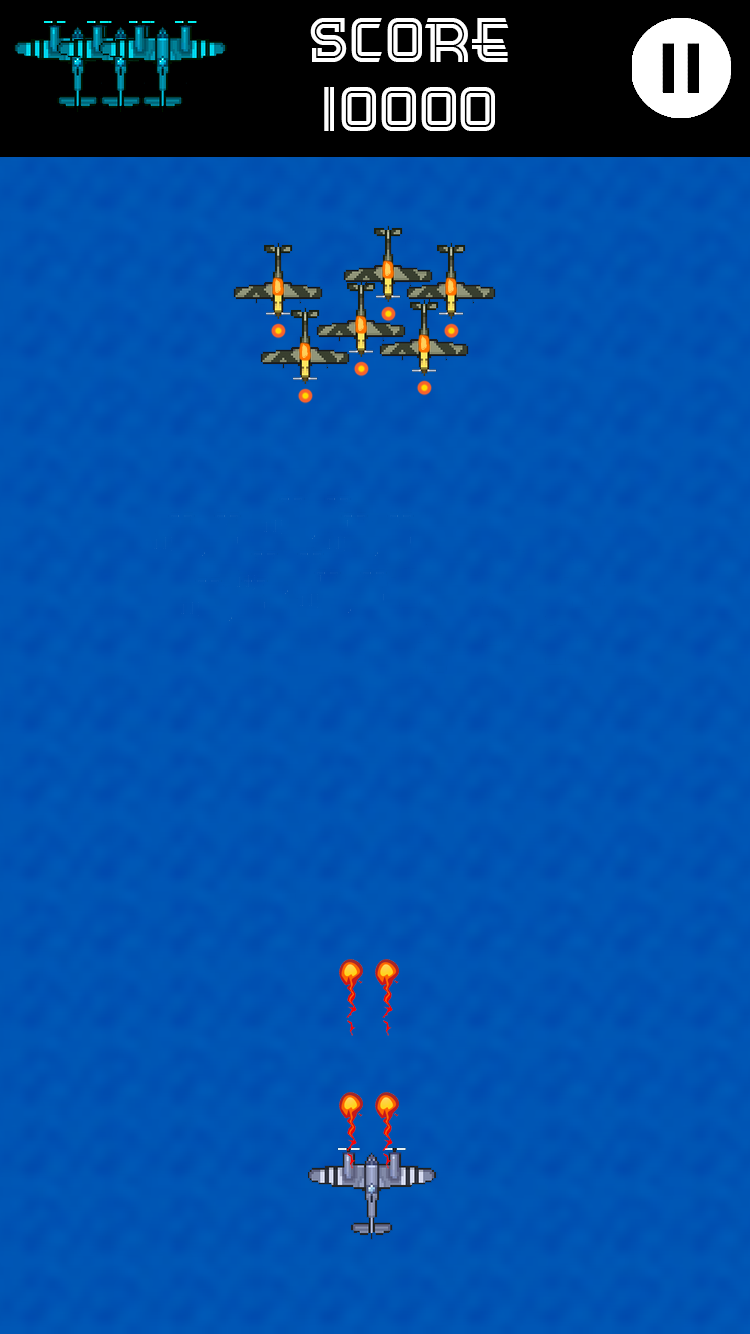
<style>
.page{position:relative;width:750px;height:1334px}
.page>*{position:absolute;margin:0}
.t1{font:62.5px "CinemaGothicBTNInline";color:#ffffff}
</style>
<div class="page">
<p class="t1" style="left:310px;top:18px;width:199px;height:44px">Score</p>
<p class="t1" style="left:324px;top:87px;width:171px;height:44px">10000</p>
</div>
